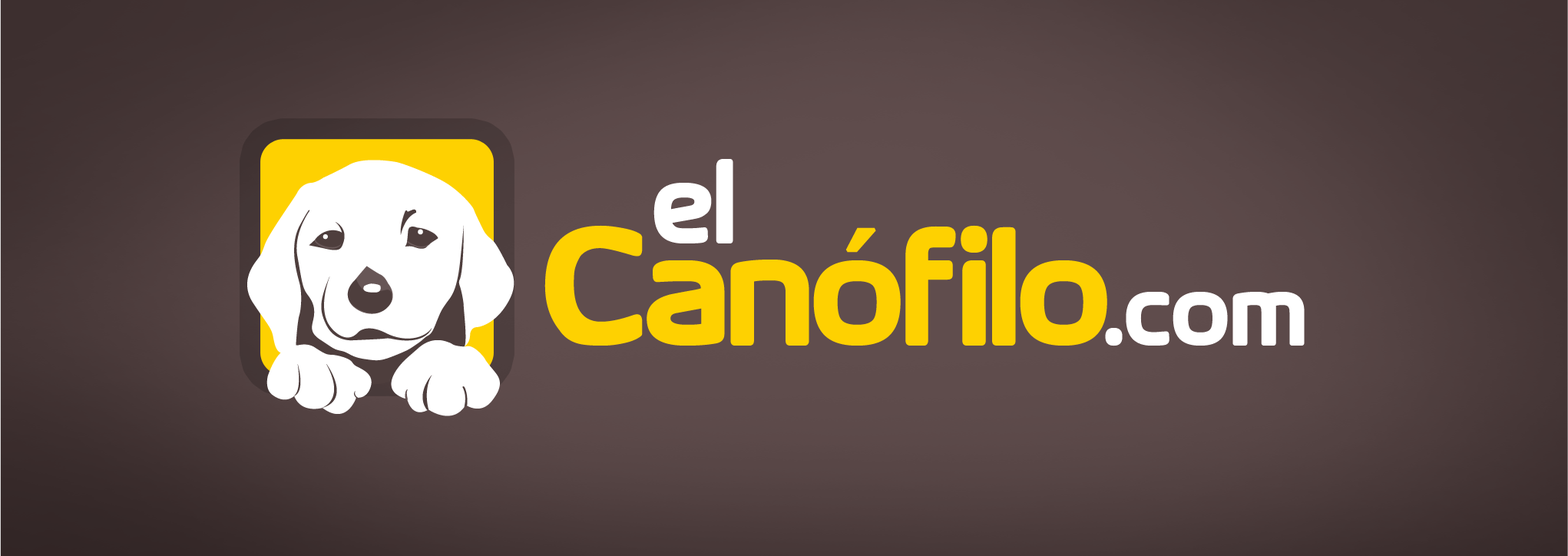
<style>
.page{position:relative;width:1568px;height:556px}
.page>*{position:absolute;margin:0}
.t1{font:108.8px "SKYfontThick";letter-spacing:-0.048em;color:#ffffff}
.t2{font:108.8px "SKYfontThick";letter-spacing:-0.045em;color:#ffffff}
.t3{font:153.6px "SKYfontThick";letter-spacing:-0.021em;color:#fed101}
.t4{font:153.6px "SKYfontThick";letter-spacing:-0.065em;color:#fed101}
.t5{font:153.6px "SKYfontThick";letter-spacing:0.01em;color:#fed101}
.t6{font:153.6px "SKYfontThick";letter-spacing:0.005em;color:#fed101}
.t7{font:153.6px "SKYfontThick";letter-spacing:-0.044em;color:#fed101}
.t8{font:153.6px "SKYfontThick";letter-spacing:-0.069em;color:#fed101}
.t9{font:153.6px "SKYfontThick";letter-spacing:0.012em;color:#fed101}
.t10{font:153.6px "SKYfontThick";letter-spacing:-0.035em;color:#fed101}
.t11{font:115.2px "Swiss721BT-Heavy";letter-spacing:-0.035em;color:#fed101;font-weight:bold}
.t12{font:96px "SKYfontThick";letter-spacing:0.07em;color:#ffffff}
.t13{font:96px "SKYfontThick";letter-spacing:0.05em;color:#ffffff}
.t14{font:96px "SKYfontThick";letter-spacing:-0.01em;color:#ffffff}
.t15{font:96px "SKYfontThick";letter-spacing:0.01em;color:#ffffff}
</style>
<div class="page">
<p class="t1" style="left:653px;top:159px;width:80px;height:84px">e<span class="t2">l</span></p>
<p class="t3" style="left:544px;top:225px;width:563px;height:121px">C<span class="t4">a</span><span class="t5">n</span><span class="t6">o</span><span class="t7">f</span><span class="t8">i</span><span class="t9">l</span><span class="t10">o</span></p>
<p class="t11" style="left:845px;top:227px;width:31px;height:26px">´</p>
<p class="t12" style="left:1105px;top:292px;width:200px;height:54px">.<span class="t13">c</span><span class="t14">o</span><span class="t15">m</span></p>
</div>
